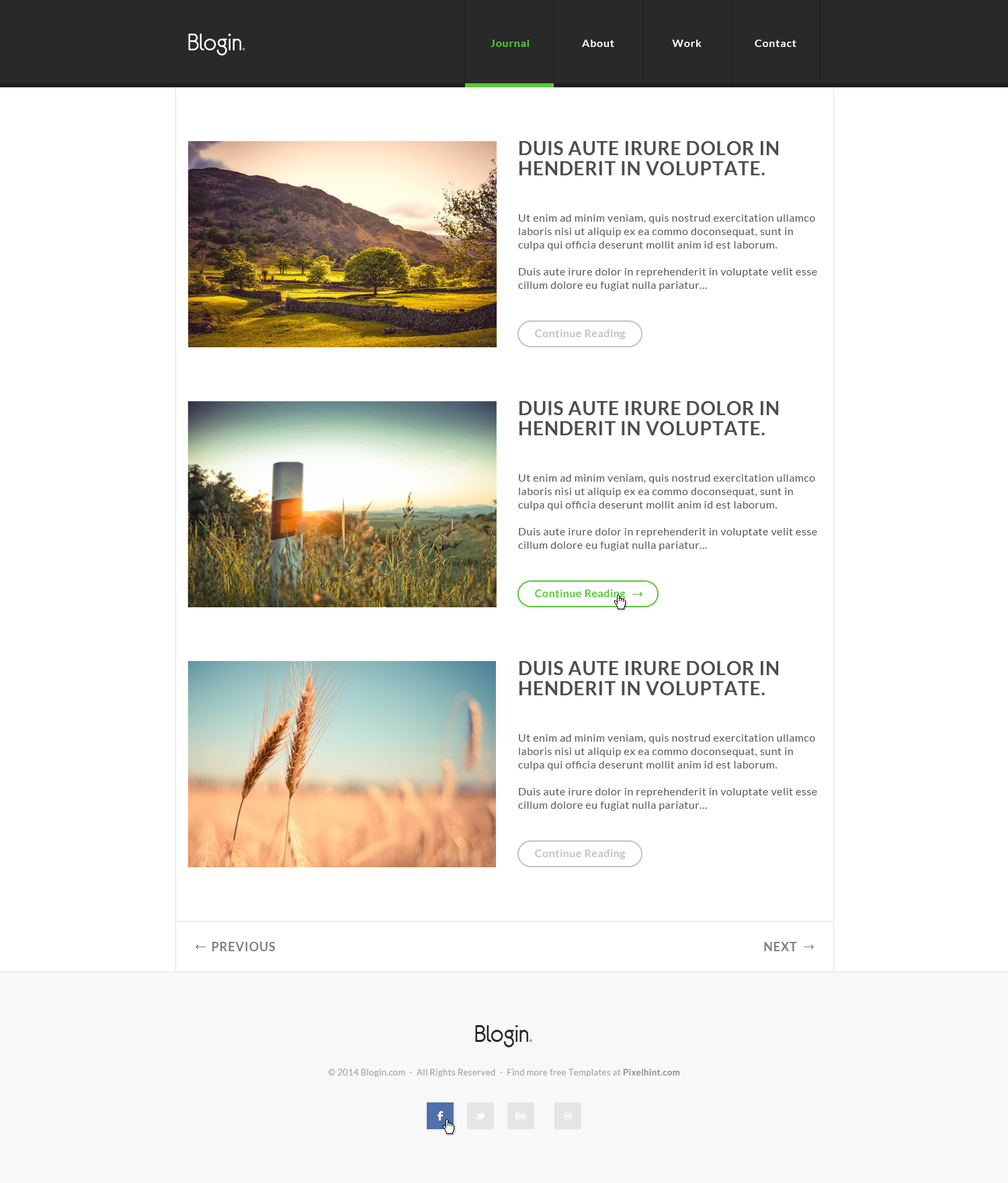
<style>
.page{position:relative;width:1008px;height:1183px;background:#ffffff}
.page>*{position:absolute;margin:0}
.t1{font:26.9px "Eurofurenceregular";letter-spacing:-0.02em;color:#ffffff}
.t2{font:26.9px "Eurofurenceregular";letter-spacing:-0.02em;color:#58c93a}
.t3{font:10.8px "Lato-Bold";letter-spacing:0.05em;color:#58c93a}
.t4{font:10.8px "Lato-Bold";letter-spacing:0.05em;color:#ffffff}
.t5{font:18.8px/20.2px "Lato-Bold";letter-spacing:0.03em;color:#4f4e4e;text-transform:uppercase}
.t6{font:10.8px/13.4px "Lato-Regular";letter-spacing:0.03em;color:#606060}
.t7{font:10.8px "Lato-Bold";letter-spacing:0.03em;color:#c2c1c1}
.t8{font:10.8px "Lato-Bold";letter-spacing:0.03em;color:#58c93a}
.t9{font:10.8px "Lato-Bold";letter-spacing:0.03em;color:#c2c2c2}
.t10{font:12.1px "Lato-Bold";letter-spacing:0.05em;color:#818181;text-transform:uppercase}
.t11{font:26.9px "Eurofurenceregular";letter-spacing:-0.02em;color:#292929}
.t12{font:8.7px "Lato-Regular";letter-spacing:0.03em;color:#a6a6a6}
.t13{font:8.7px "Lato-Bold";letter-spacing:0.03em;color:#939292}
</style>
<div class="page">
<p class="t1" style="left:188px;top:34px;width:57px;height:22px">Blogin<span class="t2">.</span></p>
<p class="t3" style="left:490px;top:40px;width:39px;height:7px">Journal</p>
<p class="t4" style="left:582px;top:40px;width:32px;height:7px">About</p>
<p class="t4" style="left:672px;top:40px;width:29px;height:7px">Work</p>
<p class="t4" style="left:755px;top:40px;width:41px;height:7px">Contact</p>
<p class="t5" style="left:519px;top:141px;width:260px;height:34px">Duis aute irure dolor in <br>henderit in voluptate.</p>
<p class="t6" style="left:518px;top:214px;width:299px;height:77px">Ut enim ad minim veniam, quis nostrud exercitation ullamco laboris nisi ut aliquip ex ea commo doconsequat, sunt in culpa qui officia deserunt mollit anim id est laborum. <br><br>Duis aute irure dolor in reprehenderit in voluptate velit esse cillum dolore eu fugiat nulla pariatur...</p>
<p class="t7" style="left:535px;top:329px;width:91px;height:10px">Continue Reading</p>
<p class="t5" style="left:519px;top:401px;width:260px;height:34px">Duis aute irure dolor in <br>henderit in voluptate.</p>
<p class="t6" style="left:518px;top:474px;width:299px;height:77px">Ut enim ad minim veniam, quis nostrud exercitation ullamco laboris nisi ut aliquip ex ea commo doconsequat, sunt in culpa qui officia deserunt mollit anim id est laborum. <br><br>Duis aute irure dolor in reprehenderit in voluptate velit esse cillum dolore eu fugiat nulla pariatur...</p>
<p class="t8" style="left:535px;top:589px;width:91px;height:10px">Continue Reading</p>
<p class="t5" style="left:519px;top:661px;width:260px;height:34px">Duis aute irure dolor in <br>henderit in voluptate.</p>
<p class="t6" style="left:518px;top:734px;width:299px;height:77px">Ut enim ad minim veniam, quis nostrud exercitation ullamco laboris nisi ut aliquip ex ea commo doconsequat, sunt in culpa qui officia deserunt mollit anim id est laborum. <br><br>Duis aute irure dolor in reprehenderit in voluptate velit esse cillum dolore eu fugiat nulla pariatur...</p>
<p class="t9" style="left:535px;top:849px;width:91px;height:10px">Continue Reading</p>
<p class="t10" style="left:212px;top:942px;width:63px;height:9px">Previous</p>
<p class="t10" style="left:764px;top:942px;width:33px;height:9px">Next</p>
<p class="t11" style="left:475px;top:1025px;width:57px;height:22px">Blogin<span class="t2">.</span></p>
<p class="t12" style="left:328px;top:1069px;width:352px;height:8px">© 2014 Blogin.com  -  All Rights Reserved  -  Find more free Templates at <span class="t13">Pixelhint.com</span></p>
</div>
